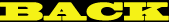
<style>
.page{position:relative;width:169px;height:22px;background:#f5f216}
.page>*{position:absolute;margin:0}
.t1{font:24px "BlackoakStd";color:#f5f216}
</style>
<div class="page">
<p class="t1" style="left:0px;top:2px;width:169px;height:19px">BACK</p>
</div>
